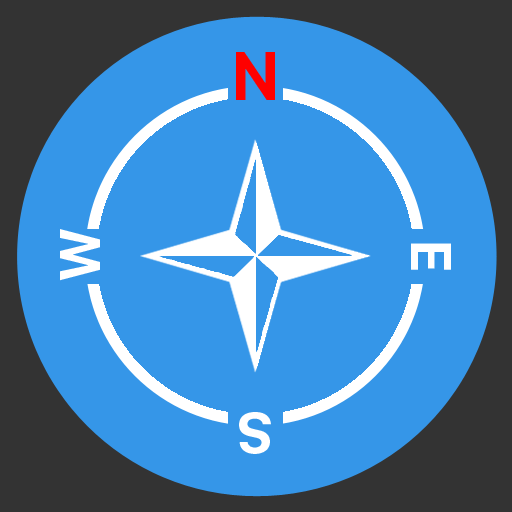
<style>
.page{position:relative;width:512px;height:512px;background:#3596e8}
.page>*{position:absolute;margin:0}
.t1{font:72px "SanFranciscoDisplay-Bold";color:#ff0000}
.t2{font:60px "SanFranciscoDisplay-Bold";color:#ffffff}
</style>
<div class="page">
<p class="t1" style="left:236px;top:52px;width:39px;height:48px">N</p>
<p class="t2" style="left:60px;top:229px;width:40px;height:52px;rotate:-90deg">W</p>
<p class="t2" style="left:411px;top:243px;width:40px;height:27px;rotate:90deg">E</p>
<p class="t2" style="left:239px;top:412px;width:32px;height:42px;rotate:180deg">S</p>
</div>
